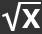
<style>
.page{position:relative;width:42px;height:34px;background:#333333}
.page>*{position:absolute;margin:0}
.t1{font:38px "MyriadPro-Semibold";color:#ffffff}
</style>
<div class="page">
<p class="t1" style="left:22px;top:9px;width:19px;height:19px">x</p>
</div>
